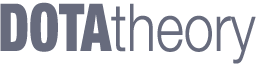
<style>
.page{position:relative;width:256px;height:64px;background:#ffffff}
.page>*{position:absolute;margin:0}
.t1{font:65.9px "HelveticaNeue-Light";color:#676b7d;scale:0.82 1}
.t2{font:65.9px "HelveticaNeue-CondensedBlack";color:#676b7d;scale:0.82 1}
</style>
<div class="page">
<p class="t1" style="left:0px;top:2px;width:256px;height:62px"><span class="t2">DOTA</span>theory</p>
</div>
